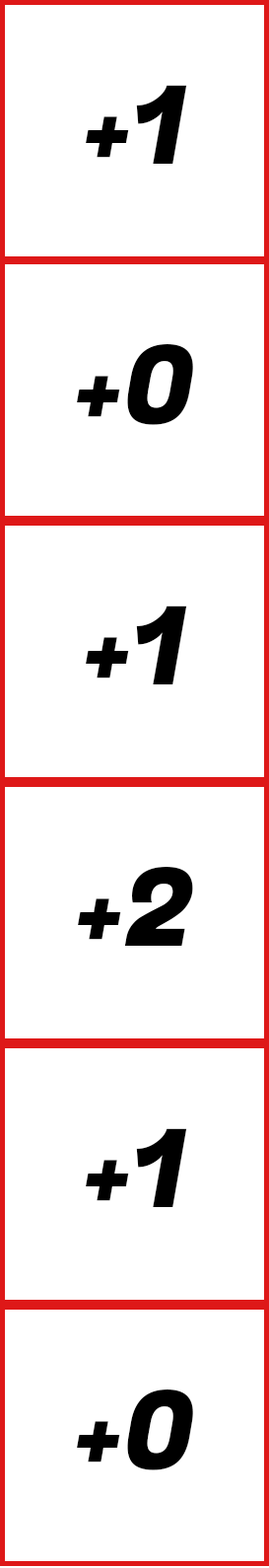
<style>
.page{position:relative;width:269px;height:1568px;background:#ffffff}
.page>*{position:absolute;margin:0}
.t1{font:108.5px "FugazOne-Regular";color:#000000}
</style>
<div class="page">
<p class="t1" style="left:86px;top:85px;width:101px;height:79px">+1</p>
<p class="t1" style="left:77px;top:344px;width:116px;height:81px">+0</p>
<p class="t1" style="left:86px;top:606px;width:101px;height:78px">+1</p>
<p class="t1" style="left:78px;top:867px;width:115px;height:79px">+2</p>
<p class="t1" style="left:86px;top:1128px;width:101px;height:79px">+1</p>
<p class="t1" style="left:77px;top:1390px;width:116px;height:80px">+0</p>
</div>
